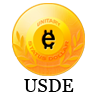
<style>
.page{position:relative;width:96px;height:96px;background:#ffffff}
.page>*{position:absolute;margin:0}
.t1{font:18.4px "Georgia";color:#000000}
</style>
<div class="page">
<p class="t1" style="left:24px;top:79px;width:50px;height:13px">USDE</p>
</div>
